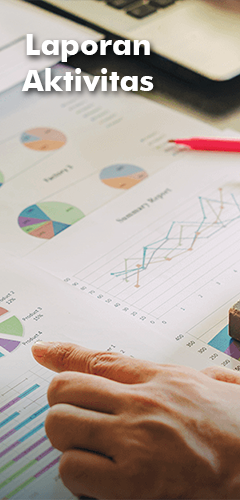
<style>
.page{position:relative;width:240px;height:500px}
.page>*{position:absolute;margin:0}
.t1{font:30px "FuturaBT-Bold";color:#ffffff}
</style>
<div class="page">
<p class="t1" style="left:21px;top:34px;width:133px;height:57px;text-align:center">Laporan<br>Aktivitas</p>
</div>
